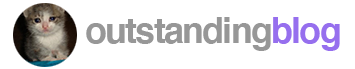
<style>
.page{position:relative;width:355px;height:69px;background:#ffffff}
.page>*{position:absolute;margin:0}
.t1{font:36px "Helvetica-Bold";letter-spacing:-0.05em;color:#979797}
.t2{font:36px "Helvetica-Bold";letter-spacing:-0.05em;color:#966fee}
</style>
<div class="page">
<p class="t1" style="left:86px;top:17px;width:254px;height:34px">outstanding<span class="t2">blog</span></p>
</div>
